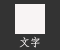
<style>
.page{position:relative;width:60px;height:50px;background:#333333}
.page>*{position:absolute;margin:0}
.t1{font:11px "STFangsong";color:#f8f4f4}
</style>
<div class="page">
<p class="t1" style="left:19px;top:36px;width:21px;height:12px">文字</p>
</div>
